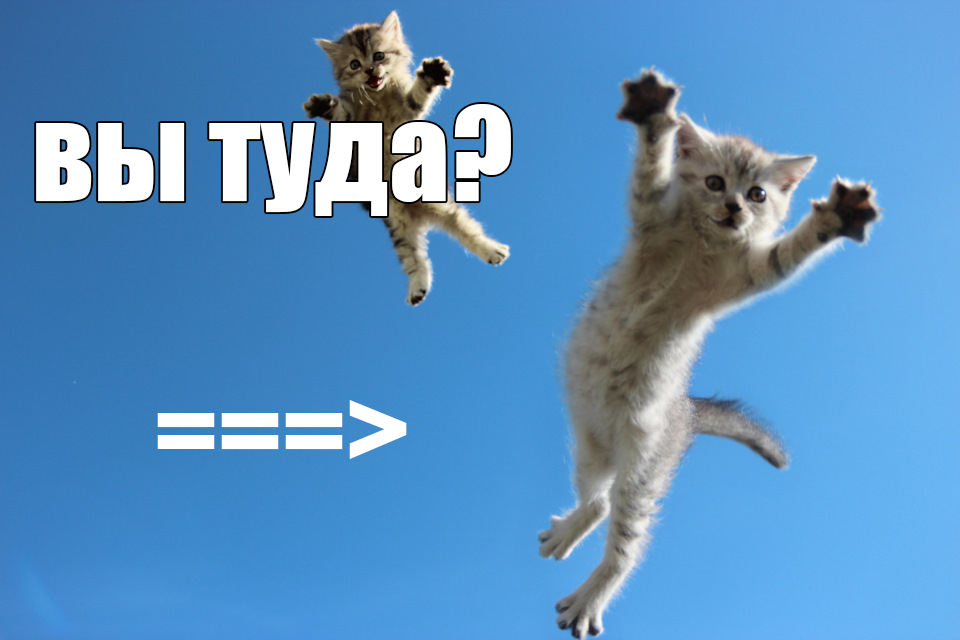
<style>
.page{position:relative;width:960px;height:640px}
.page>*{position:absolute;margin:0}
.t1{font:120px "Impact";color:#ffffff}
</style>
<div class="page">
<p class="t1" style="left:36px;top:104px;width:475px;height:112px">вы туда?</p>
<p class="t1" style="left:157px;top:400px;width:250px;height:59px">===&gt;</p>
</div>
